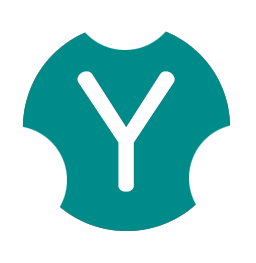
<style>
.page{position:relative;width:256px;height:263px;background:#ffffff}
.page>*{position:absolute;margin:0}
.t1{font:150px "HiraMaruProN-W4";color:#ffffff;text-transform:uppercase;font-weight:bold}
</style>
<div class="page">
<p class="t1" style="left:77px;top:71px;width:98px;height:121px">Y</p>
</div>
